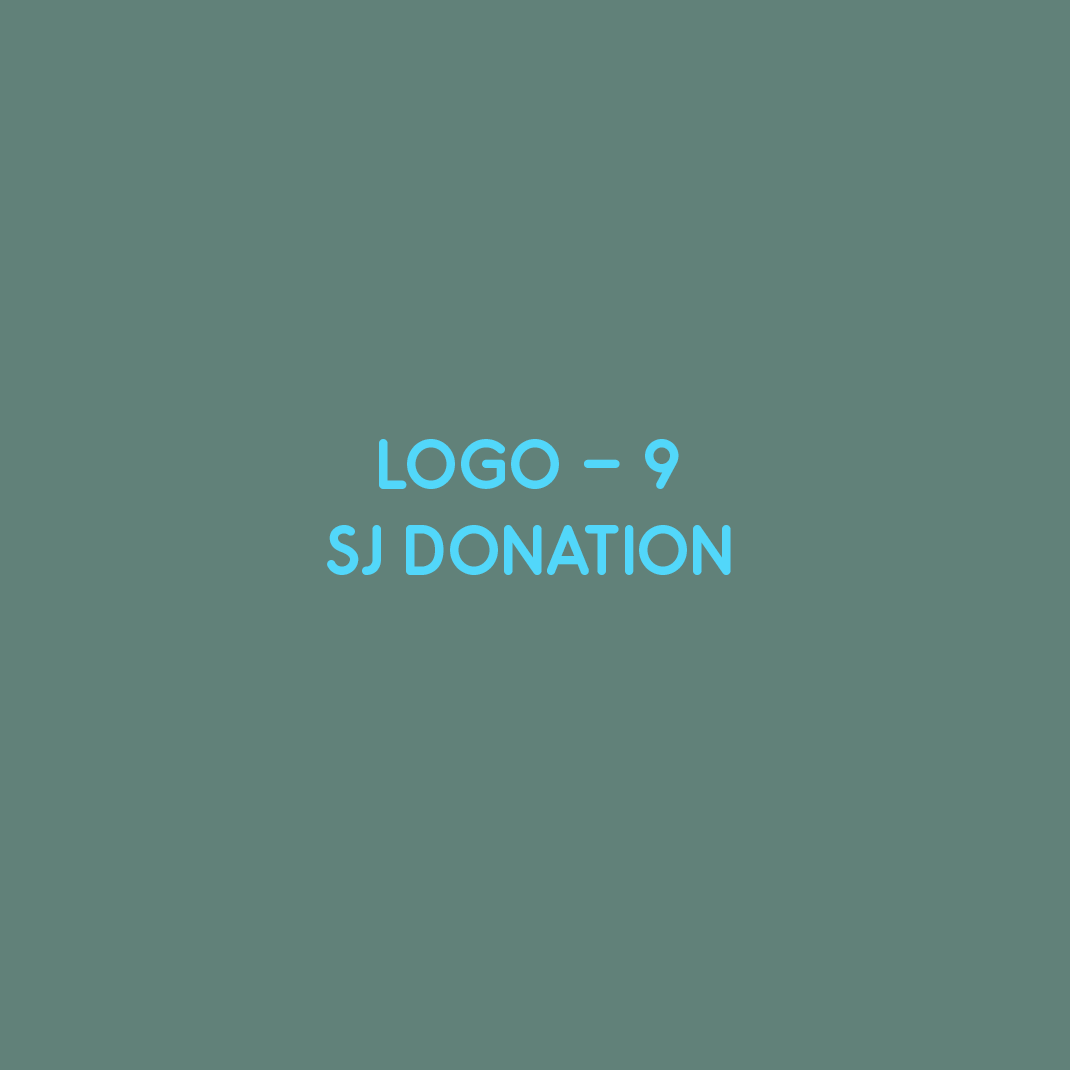
<style>
.page{position:relative;width:1070px;height:1070px;background:#618179}
.page>*{position:absolute;margin:0}
.t1{font:72px "Odin-Bold";color:#52d7fa}
</style>
<div class="page">
<p class="t1" style="left:327px;top:439px;width:404px;height:136px;text-align:center">LOGO - 9<br>SJ DONATION</p>
</div>
